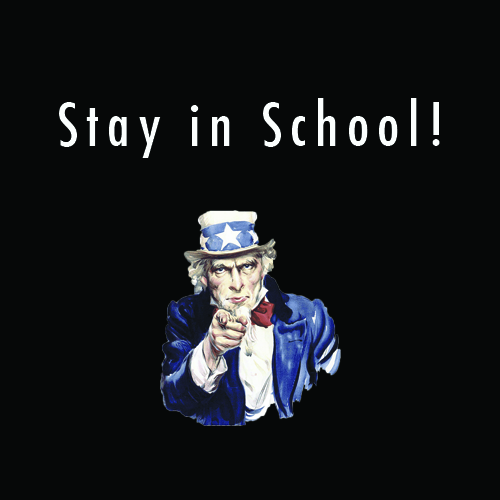
<style>
.page{position:relative;width:500px;height:500px;background:#060808}
.page>*{position:absolute;margin:0}
.t1{font:58.3px "Futura-CondensedMedium";letter-spacing:0.14em;color:#fbfffe}
</style>
<div class="page">
<p class="t1" style="left:59px;top:98px;width:381px;height:60px">Stay in School!</p>
</div>
